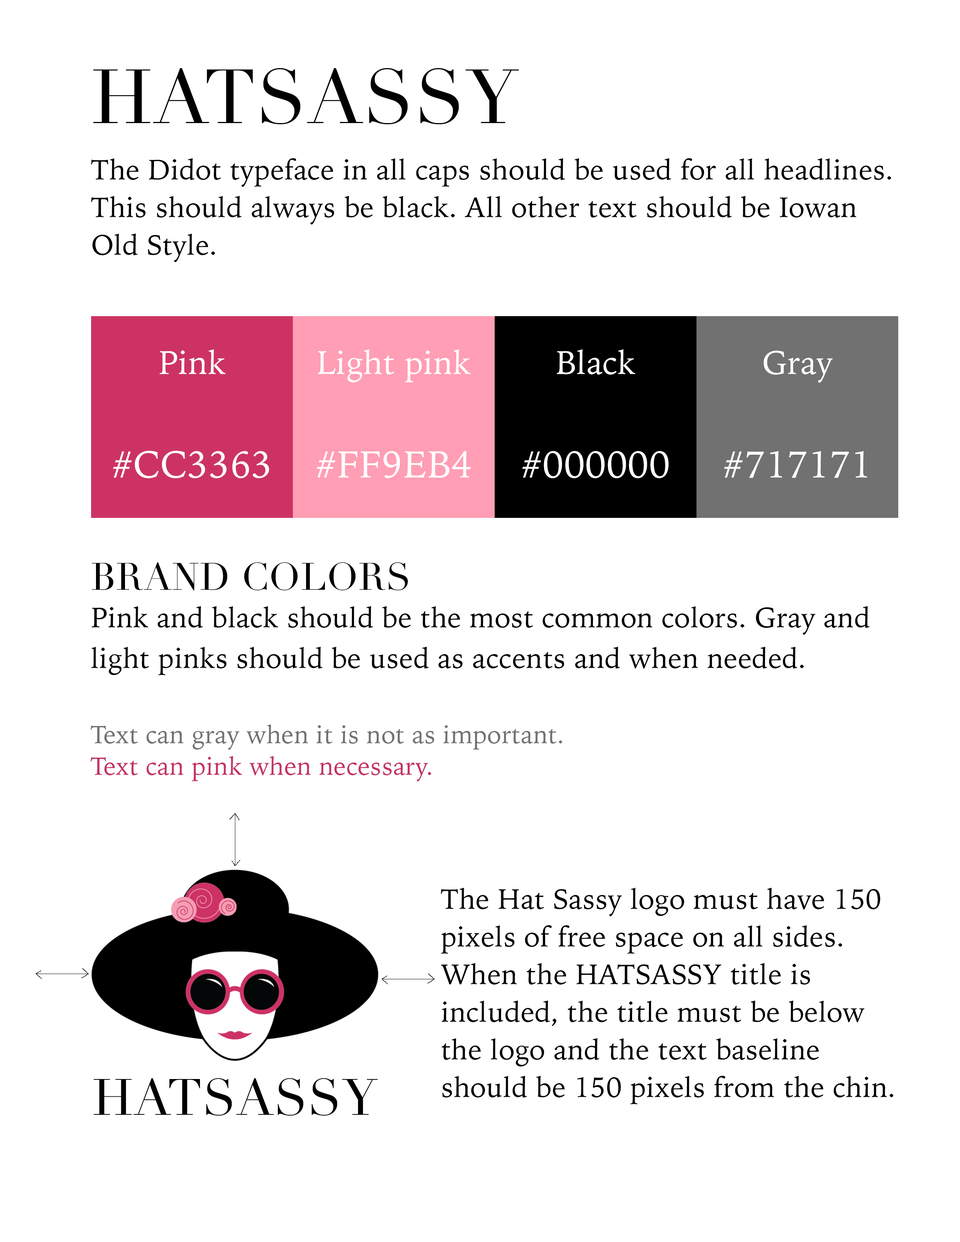
<style>
.page{position:relative;width:960px;height:1242px;background:#ffffff}
.page>*{position:absolute;margin:0}
.t1{font:75.3px "Didot";letter-spacing:0.01em;color:#000000;text-transform:uppercase}
.t2{font:28.2px/37.6px "IowanOldStyle-Roman";letter-spacing:0.01em;color:#000000}
.t3{font:32.9px "IowanOldStyle-Roman";letter-spacing:0.01em;color:#ffffff}
.t4{font:37.6px "IowanOldStyle-Roman";letter-spacing:0.01em;color:#ffffff}
.t5{font:37.6px/47.1px "Didot";letter-spacing:0.01em;color:#000000}
.t6{font:25.1px/28.2px "IowanOldStyle-Roman";letter-spacing:0.01em;color:#717171}
.t7{font:25.1px/31.4px "IowanOldStyle-Roman";letter-spacing:0.01em;color:#c33363}
.t8{font:50.2px "Didot";letter-spacing:0.01em;color:#000000;text-transform:uppercase}
</style>
<div class="page">
<p class="t1" style="left:93px;top:68px;width:426px;height:56px">Hatsassy</p>
<p class="t2" style="left:91px;top:158px;width:800px;height:104px">The Didot typeface in all caps should be used for all headlines. This should always be black. All other text should be Iowan Old Style.</p>
<p class="t3" style="left:160px;top:349px;width:65px;height:25px">Pink</p>
<p class="t3" style="left:318px;top:349px;width:153px;height:33px">Light pink</p>
<p class="t3" style="left:557px;top:349px;width:78px;height:26px">Black</p>
<p class="t3" style="left:763px;top:350px;width:70px;height:33px">Gray</p>
<p class="t4" style="left:113px;top:451px;width:156px;height:27px">#CC3363</p>
<p class="t4" style="left:317px;top:451px;width:154px;height:27px">#FF9EB4</p>
<p class="t4" style="left:522px;top:451px;width:147px;height:27px">#000000</p>
<p class="t4" style="left:724px;top:451px;width:143px;height:27px">#717171</p>
<p class="t2" style="left:90px;top:562px;width:780px;height:220px"><span class="t5">BRAND COLORS<br></span>Pink and black should be the most common colors. Gray and light pinks should be used as accents and when needed. <br><br><span class="t6">Text can gray when it is not as important.<br></span><span class="t7">Text can pink when necessary.</span></p>
<p class="t2" style="left:440px;top:888px;width:453px;height:216px">The Hat Sassy logo must have 150 pixels of free space on all sides. When the HATSASSY title is included, the title must be below the logo and the text baseline should be 150 pixels from the chin.</p>
<p class="t8" style="left:93px;top:1078px;width:285px;height:38px">Hatsassy</p>
</div>
